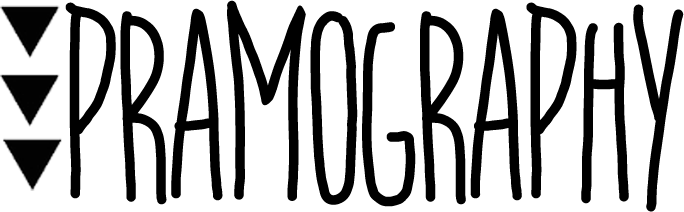
<style>
.page{position:relative;width:684px;height:212px;background:#ffffff}
.page>*{position:absolute;margin:0}
.t1{font:258.4px "Bite___Bullet";letter-spacing:-0.08em;color:#000000}
</style>
<div class="page">
<p class="t1" style="left:65px;top:0px;width:619px;height:212px">pramography</p>
</div>
